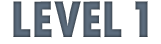
<style>
.page{position:relative;width:161px;height:44px;background:#ffffff}
.page>*{position:absolute;margin:0}
.t1{font:48px "Kankin";letter-spacing:0.01em;color:#5c6c7d}
</style>
<div class="page">
<p class="t1" style="left:13px;top:1px;width:135px;height:37px">LEVEL 1</p>
</div>
